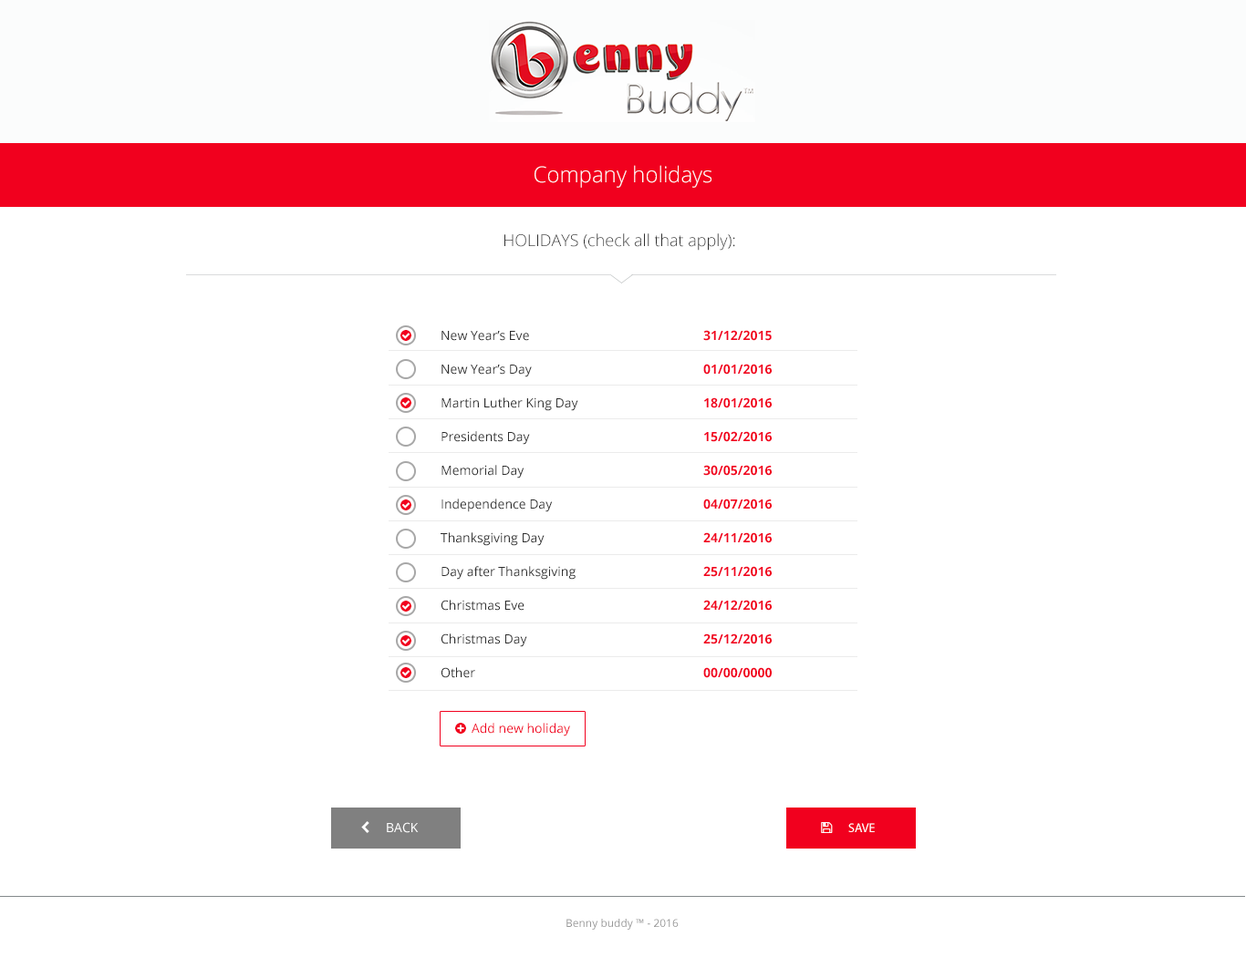
<style>
.page{position:relative;width:1246px;height:957px;background:#ffffff}
.page>*{position:absolute;margin:0}
.t1{font:21.9px "OpenSans-Light";color:#ffffff}
.t2{font:16.4px "OpenSans-Light";color:#2e2e2e}
.t3{font:12.8px/33.7px "OpenSans";color:#2e2e2e}
.t4{font:12.8px/33.7px "OpenSans-Bold";color:#f1001e}
.t5{font:10.9px "OpenSans";color:#979696}
</style>
<div class="page">
<p class="t1" style="left:534px;top:165px;width:177px;height:23px">Company holidays</p>
<p class="t2" style="left:504px;top:233px;width:231px;height:18px">HOLIDAYS (check all that apply):</p>
<p class="t3" style="left:440px;top:330px;width:331px;height:348px">New Year’s Eve      <span class="t4">31/12/2015<br></span>New Year’s Day      <span class="t4">01/01/2016<br></span>Martin Luther King Day    <span class="t4">18/01/2016<br></span>Presidents Day      <span class="t4">15/02/2016<br></span>Memorial Day      <span class="t4">30/05/2016<br></span>Independence Day     <span class="t4">04/07/2016<br></span>Thanksgiving Day     <span class="t4">24/11/2016<br></span>Day after Thanksgiving    <span class="t4">25/11/2016<br></span>Christmas Eve      <span class="t4">24/12/2016<br></span>Christmas Day      <span class="t4">25/12/2016<br></span>Other       <span class="t4">00/00/0000</span></p>
<p class="t5" style="left:566px;top:919px;width:112px;height:11px">Benny buddy ™ - 2016</p>
</div>
